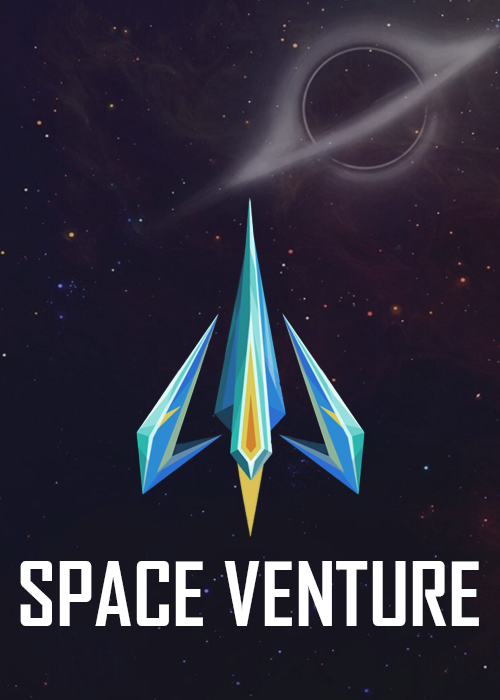
<style>
.page{position:relative;width:500px;height:700px}
.page>*{position:absolute;margin:0}
.t1{font:85px "AgencyFB-Bold";color:#ffffff}
</style>
<div class="page">
<p class="t1" style="left:20px;top:561px;width:459px;height:65px">SPACE VENTURE</p>
</div>
